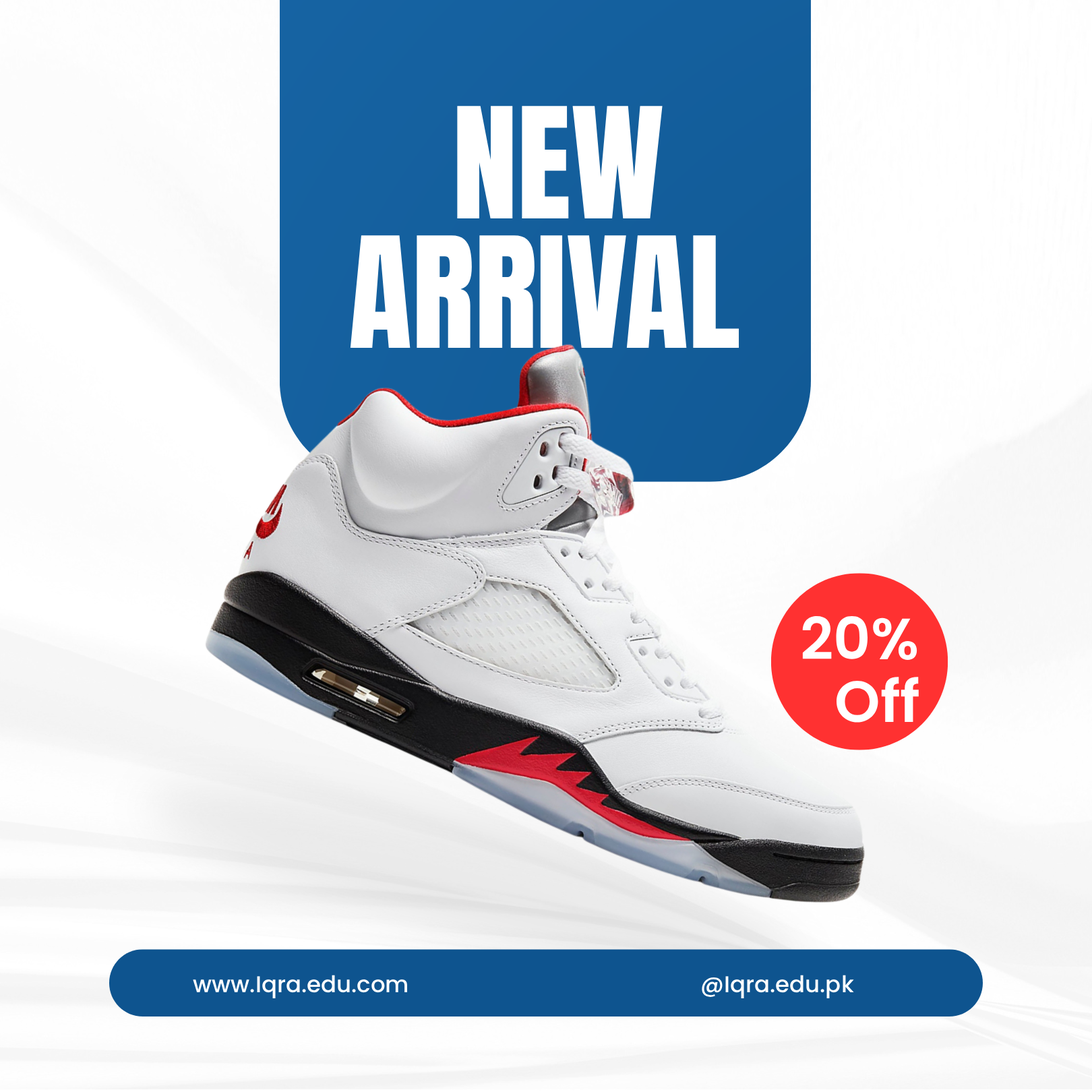
<style>
.page{position:relative;width:1092px;height:1092px}
.page>*{position:absolute;margin:0}
.t1{font:130.8px/129.4px "Anton-Regular";color:#ffffff}
.t2{font:130.8px "Anton-Regular";color:#ffffff}
.t3{font:58px/129.4px "Poppins-SemiBold";color:#ffffff}
.t4{font:58px/62.7px "Poppins-SemiBold";color:#ffffff}
.t5{font:22.9px "Poppins-Medium";color:#ffffff}
</style>
<div class="page">
<p class="t1" style="left:350px;top:106px;width:389px;height:242px;text-align:center"><span class="t2">NEW</span><br>ARRIVAL</p>
<p class="t3" style="left:802px;top:615px;width:117px;height:108px">20%<span class="t4"><br>Off</span></p>
<p class="t5" style="left:193px;top:975px;width:214px;height:23px">www.Iqra.edu.com</p>
<p class="t5" style="left:702px;top:975px;width:152px;height:23px">@Iqra.edu.pk</p>
</div>
